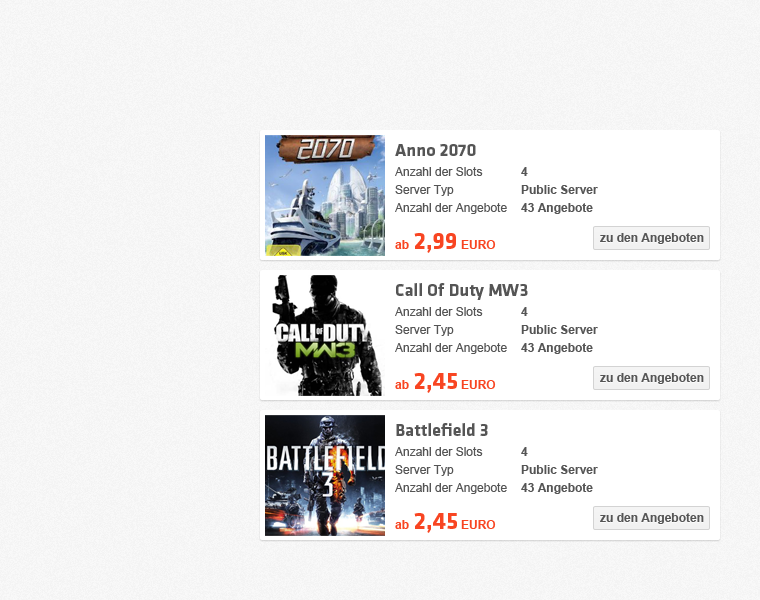
<style>
.page{position:relative;width:760px;height:600px;background:#ffffff}
.page>*{position:absolute;margin:0}
.t1{font:18px "KlavikaBold-Bold";color:#555555}
.t2{font:12px "ArialMT";color:#555555}
.t3{font:12px "Arial-BoldMT";color:#555555}
.t4{font:24px "KlavikaBold-Bold";color:#f84522}
.t5{font:12px "Arial-BoldMT";color:#f84522}
</style>
<div class="page">
<p class="t1" style="left:395px;top:144px;width:81px;height:12px">Anno 2070</p>
<p class="t2" style="left:395px;top:167px;width:88px;height:9px">Anzahl der Slots</p>
<p class="t3" style="left:521px;top:167px;width:7px;height:9px">4</p>
<p class="t2" style="left:395px;top:185px;width:59px;height:11px">Server Typ</p>
<p class="t3" style="left:521px;top:185px;width:77px;height:9px">Public Server</p>
<p class="t2" style="left:395px;top:203px;width:112px;height:11px">Anzahl der Angebote</p>
<p class="t3" style="left:521px;top:203px;width:72px;height:11px">43 Angebote</p>
<p class="t4" style="left:414px;top:233px;width:42px;height:20px">2,99</p>
<p class="t3" style="left:600px;top:233px;width:104px;height:11px">zu den Angeboten</p>
<p class="t5" style="left:395px;top:240px;width:14px;height:9px">ab</p>
<p class="t5" style="left:461px;top:240px;width:35px;height:9px">EURO</p>
<p class="t1" style="left:396px;top:283px;width:132px;height:17px">Call Of Duty MW3</p>
<p class="t2" style="left:395px;top:307px;width:88px;height:9px">Anzahl der Slots</p>
<p class="t3" style="left:521px;top:307px;width:7px;height:9px">4</p>
<p class="t2" style="left:395px;top:325px;width:59px;height:11px">Server Typ</p>
<p class="t3" style="left:521px;top:325px;width:77px;height:9px">Public Server</p>
<p class="t2" style="left:395px;top:343px;width:112px;height:11px">Anzahl der Angebote</p>
<p class="t3" style="left:521px;top:343px;width:72px;height:11px">43 Angebote</p>
<p class="t4" style="left:414px;top:373px;width:43px;height:20px">2,45</p>
<p class="t3" style="left:600px;top:373px;width:104px;height:11px">zu den Angeboten</p>
<p class="t5" style="left:395px;top:380px;width:14px;height:9px">ab</p>
<p class="t5" style="left:461px;top:380px;width:35px;height:9px">EURO</p>
<p class="t1" style="left:396px;top:423px;width:92px;height:13px">Battlefield 3</p>
<p class="t2" style="left:395px;top:447px;width:88px;height:9px">Anzahl der Slots</p>
<p class="t3" style="left:521px;top:447px;width:7px;height:9px">4</p>
<p class="t2" style="left:395px;top:465px;width:59px;height:11px">Server Typ</p>
<p class="t3" style="left:521px;top:465px;width:77px;height:9px">Public Server</p>
<p class="t2" style="left:395px;top:483px;width:112px;height:11px">Anzahl der Angebote</p>
<p class="t3" style="left:521px;top:483px;width:72px;height:11px">43 Angebote</p>
<p class="t5" style="left:395px;top:520px;width:14px;height:9px">ab</p>
<p class="t4" style="left:414px;top:513px;width:43px;height:20px">2,45</p>
<p class="t5" style="left:461px;top:520px;width:35px;height:9px">EURO</p>
<p class="t3" style="left:600px;top:513px;width:104px;height:11px">zu den Angeboten</p>
</div>
